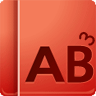
<style>
.page{position:relative;width:96px;height:96px}
.page>*{position:absolute;margin:0}
.t1{font:21px "ComicSansMS";color:#6e0400}
.t2{font:57px "Consolas-Bold";color:#6e0400}
</style>
<div class="page">
<p class="t1" style="left:79px;top:31px;width:16px;height:15px;rotate:-59deg">3</p>
<p class="t2" style="left:67px;top:45px;width:27px;height:38px">B</p>
</div>
